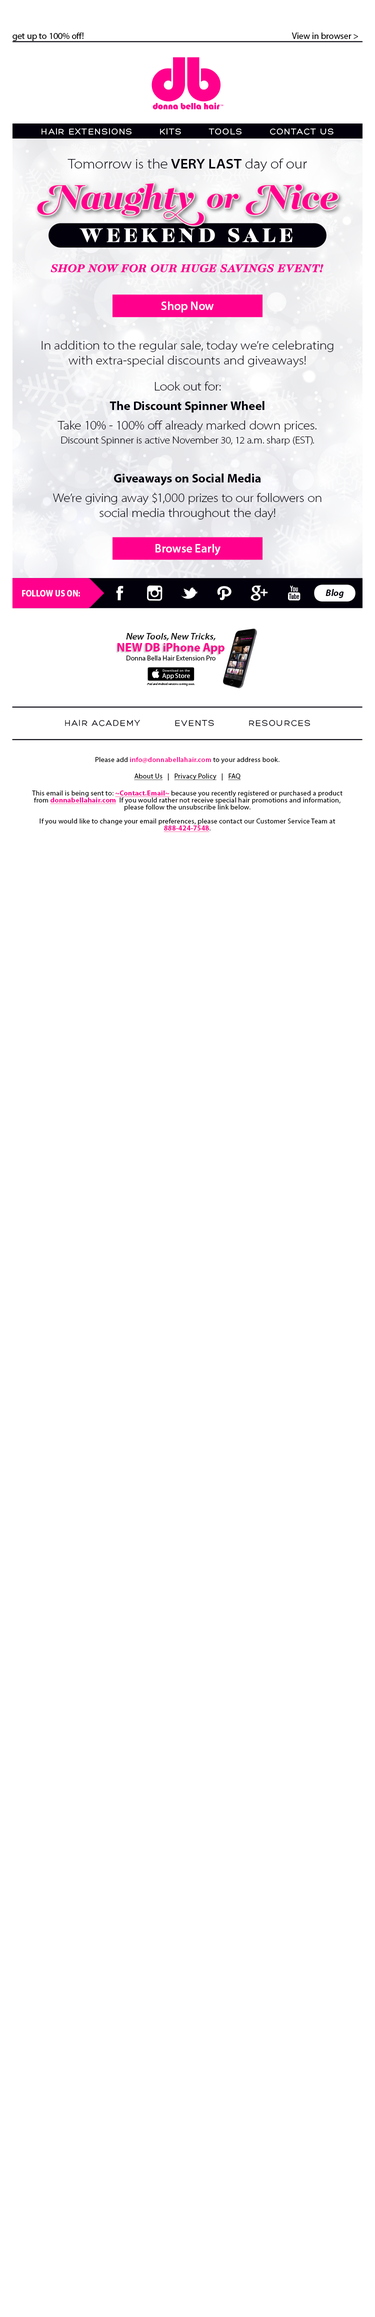
<style>
.page{position:relative;width:375px;height:2317px;background:#ffffff}
.page>*{position:absolute;margin:0}
.t1{font:9px "MyriadPro-Regular";color:#000000}
.t2{font:9px "Hero";letter-spacing:0.1em;color:#ffffff}
.t3{font:14px "MyriadPro-LightSemiExt";color:#01000b}
.t4{font:14px "MyriadPro-SemiboldSemiExt";color:#01000b}
.t5{font:12px "MyriadPro-Semibold";color:#ffffff}
.t6{font:12.5px "MyriadPro-LightSemiExt";color:#01000b}
.t7{font:10px/14.4px "MyriadPro-LightSemiExt";color:#01000b}
.t8{font:12.5px/19.4px "MyriadPro-LightSemiExt";color:#01000b}
.t9{font:12.5px/19.4px "MyriadPro-Bold";color:#01000b}
.t10{font:12.5px/15px "MyriadPro-LightSemiExt";color:#01000b}
.t11{font:9px "MyriadPro-BoldSemiCn";color:#ffffff}
.t12{font:9.3px "MyriadPro-BoldIt";color:#01000b}
.t13{font:9px "MyriadPro-SemiboldSemiExtIt";color:#000000}
.t14{font:12px "MyriadPro-Bold";color:#ff008c}
.t15{font:7px "MyriadPro-Regular";color:#000000}
.t16{font:3px "MyriadPro-It";color:#000000}
.t17{font:9px "Hero";letter-spacing:0.1em;color:#01000b}
.t18{font:7px/7px "MyriadPro-Regular";letter-spacing:0.025em;color:#000000}
.t19{font:7px "MyriadPro-Regular";letter-spacing:0.025em;color:#000000}
.t20{font:7px "MyriadPro-Semibold";letter-spacing:0.025em;color:#ff008c}
.t21{font:7px "MyriadPro-Regular";letter-spacing:0.025em;color:#000000;text-decoration:underline}
.t22{font:7px "MyriadPro-Bold";letter-spacing:0.025em;color:#ff008c;text-decoration:underline}
.t23{font:7px/7px "MyriadPro-Bold";letter-spacing:0.025em;color:#ff008c;text-decoration:underline}
</style>
<div class="page">
<p class="t1" style="left:12px;top:32px;width:346px;height:9px">get up to 100% off!                         View in browser &gt;</p>
<p class="t2" style="left:42px;top:128px;width:292px;height:7px">HAIR EXTENSIONS        KITS        TOOLS        CONTACT US</p>
<p class="t3" style="left:68px;top:158px;width:239px;height:14px">Tomorrow is the <span class="t4">VERY LAST</span> day of our</p>
<p class="t5" style="left:161px;top:302px;width:53px;height:10px">Shop Now</p>
<p class="t6" style="left:42px;top:340px;width:292px;height:28px;text-align:center">In addition to the regular sale, today we’re celebrating with extra­-special discounts and giveaways!</p>
<p class="t7" style="left:53px;top:382px;width:269px;height:138px;text-align:center"><span class="t8">Look out for:<br></span><span class="t9">The Discount Spinner Wheel <br></span><span class="t8">Take 10% - 100% off already marked down prices.<br></span>Discount Spinner is active November 30, 12 a.m. sharp (EST).<br><br><span class="t9">Giveaways on Social Media </span><span class="t8"><br>We’re giving away $1,000 prizes to our followers on </span><span class="t10">social media throughout the day!</span></p>
<p class="t5" style="left:156px;top:544px;width:64px;height:12px">Browse Early</p>
<p class="t11" style="left:22px;top:590px;width:58px;height:6px">FOLLOW US ON:</p>
<p class="t12" style="left:326px;top:589px;width:18px;height:9px">Blog</p>
<p class="t13" style="left:126px;top:633px;width:90px;height:7px">New Tools, New Tricks,</p>
<p class="t14" style="left:118px;top:643px;width:106px;height:11px">NEW DB iPhone App</p>
<p class="t15" style="left:126px;top:656px;width:90px;height:4px">Donna Bella Hair Extension Pro</p>
<p class="t16" style="left:147px;top:682px;width:47px;height:4px">iPad and Android versions coming soon.</p>
<p class="t17" style="left:65px;top:720px;width:245px;height:6px">HAIR ACADEMY          EVENTS          RESOURCES</p>
<p class="t18" style="left:32px;top:757px;width:310px;height:75px;text-align:center"><span class="t19">Please add </span><span class="t20">info@donnabellahair.com</span><span class="t19"> to your address book.<br><br></span><span class="t21">About Us</span><span class="t19">   |   </span><span class="t21">Privacy Policy</span><span class="t19">   |   </span><span class="t21">FAQ<br></span><span class="t19"><br>This email is being sent to: </span><span class="t22">~Contact.Email~</span><span class="t19"> because you recently registered </span>or purchased a product from <span class="t23">donnabellahair.com</span>  If you would rather not receive special hair promotions and information, please follow the unsubscribe link below.<br><br>If you would like to change your email preferences, please contact our Customer Service Team at <span class="t23">888-424-7548</span>.</p>
</div>
